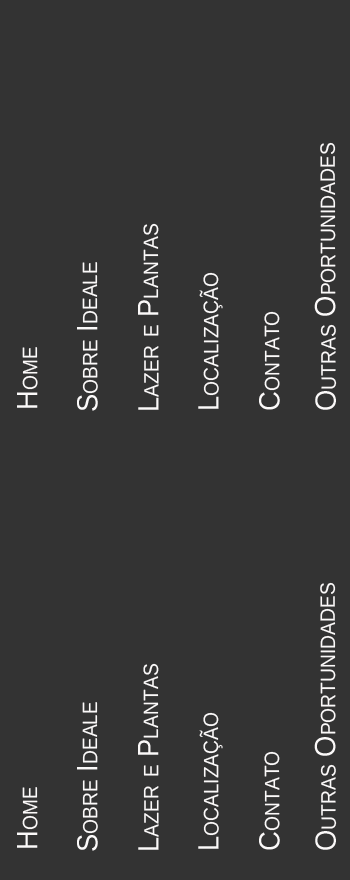
<style>
.page{position:relative;width:350px;height:880px;background:#333333}
.page>*{position:absolute;margin:0}
.t1{font:50.7px "Arimo";color:#fbf9f9;font-variant:small-caps;scale:0.93 1}
</style>
<div class="page">
<p class="t1" style="left:314px;top:142px;width:23px;height:268px;rotate:-90deg">Outras Oportunidades</p>
<p class="t1" style="left:138px;top:223px;width:21px;height:187px;rotate:-90deg">Lazer e Plantas</p>
<p class="t1" style="left:77px;top:262px;width:21px;height:149px;rotate:-90deg">Sobre Ideale</p>
<p class="t1" style="left:198px;top:272px;width:25px;height:137px;rotate:-90deg">Localização</p>
<p class="t1" style="left:259px;top:311px;width:21px;height:99px;rotate:-90deg">Contato</p>
<p class="t1" style="left:17px;top:347px;width:21px;height:61px;rotate:-90deg">Home</p>
<p class="t1" style="left:314px;top:582px;width:23px;height:268px;rotate:-90deg">Outras Oportunidades</p>
<p class="t1" style="left:138px;top:663px;width:21px;height:187px;rotate:-90deg">Lazer e Plantas</p>
<p class="t1" style="left:77px;top:702px;width:21px;height:149px;rotate:-90deg">Sobre Ideale</p>
<p class="t1" style="left:198px;top:712px;width:25px;height:137px;rotate:-90deg">Localização</p>
<p class="t1" style="left:259px;top:751px;width:21px;height:99px;rotate:-90deg">Contato</p>
<p class="t1" style="left:17px;top:787px;width:21px;height:61px;rotate:-90deg">Home</p>
</div>
